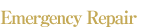
<style>
.page{position:relative;width:156px;height:27px;background:#ffffff}
.page>*{position:absolute;margin:0}
.t1{font:18px "RyuminPro-ExBold";letter-spacing:-0.08em;color:#c4a956}
</style>
<div class="page">
<p class="t1" style="left:0px;top:10px;width:137px;height:17px">Emergency Repair</p>
</div>
